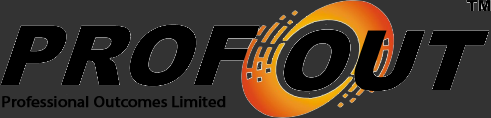
<style>
.page{position:relative;width:491px;height:118px;background:#333333}
.page>*{position:absolute;margin:0}
.t1{font:15.4px "MyriadPro-Regular";letter-spacing:-0.01em;color:#000000;font-weight:bold;scale:1.09 1}
</style>
<div class="page">
<p class="t1" style="left:2px;top:96px;width:224px;height:12px">Professional Outcomes Limited</p>
</div>
